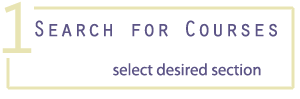
<style>
.page{position:relative;width:300px;height:99px;background:#ffffff}
.page>*{position:absolute;margin:0}
.t1{font:75px "OratorStd";color:#e8e4b3}
.t2{font:22.9px "OratorStd";color:#5c5486}
.t3{font:16.7px "MyriadPro-Regular";color:#5c5486}
</style>
<div class="page">
<p class="t1" style="left:2px;top:1px;width:30px;height:52px">1</p>
<p class="t2" style="left:35px;top:20px;width:242px;height:17px">Search for Courses</p>
<p class="t3" style="left:113px;top:63px;width:148px;height:13px">select desired section</p>
</div>
